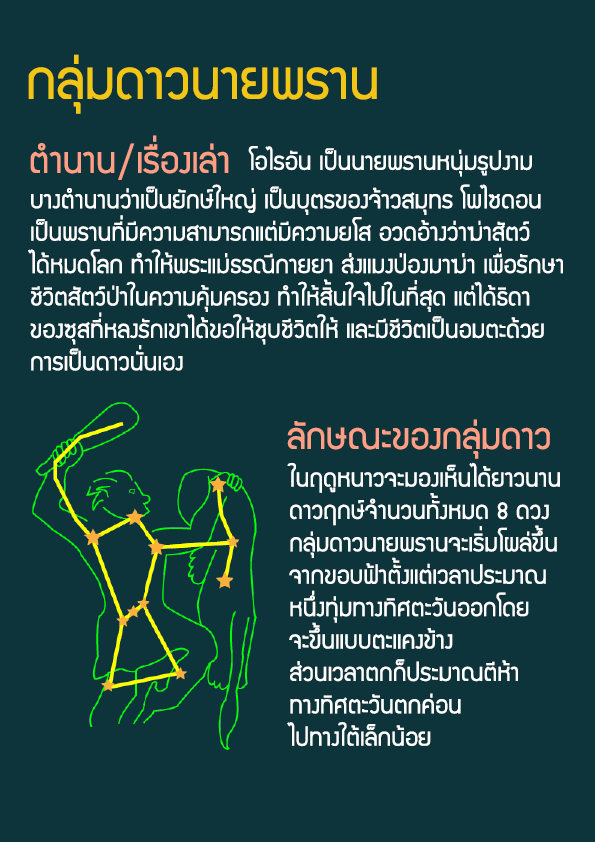
<style>
.page{position:relative;width:595px;height:842px;background:#0e343b}
.page>*{position:absolute;margin:0}
.t1{font:60px "supermarket";color:#f2c614}
.t2{font:40px "supermarket";color:#ff9f86}
.t3{font:27px "supermarket";color:#ffffff}
</style>
<div class="page">
<p class="t1" style="left:28px;top:54px;width:349px;height:60px">กลุ่มดาวนายพราน</p>
<p class="t2" style="left:30px;top:135px;width:199px;height:45px">ตำนาน/เรื่องเล่า</p>
<p class="t3" style="left:248px;top:146px;width:284px;height:31px">โอไรอัน เป็นนายพรานหนุ่มรูปงาม</p>
<p class="t3" style="left:28px;top:184px;width:535px;height:187px">บางตำนานว่าเป็นยักษ์ใหญ่ เป็นบุตรของจ้าวสมุทร โพไซดอน <br>เป็นพรานที่มีความสามารถแต่มีความยโส อวดอ้างว่าฆ่าสัตว์<br>ได้หมดโลก ทำให้พระแม่ธรณีกายยา ส่งแมงป่องมาฆ่า เพื่อรักษา<br>ชีวิตสัตว์ป่าในความคุ้มครอง ทำให้สิ้นใจไปในที่สุด แต่ได้ธิดา<br>ของซุสที่หลงรักเขาได้ขอให้ชุบชีวิตให้ และมีชีวิตเป็นอมตะด้วย<br>การเป็นดาวนั่นเอง</p>
<p class="t2" style="left:287px;top:419px;width:263px;height:40px">ลักษณะของกลุ่มดาว</p>
<p class="t3" style="left:287px;top:462px;width:273px;height:285px">ในฤดูหนาวจะมองเห็นได้ยาวนาน<br>ดาวฤกษ์จำนวนทั้งหมด 8 ดวง <br>กลุ่มดาวนายพรานจะเริ่มโผล่ขึ้น<br>จากขอบฟ้าตั้งแต่เวลาประมาณ<br>หนึ่งทุ่มทางทิศตะวันออกโดย<br>จะขึ้นแบบตะแคงข้าง<br>ส่วนเวลาตกก็ประมาณตีห้า <br>ทางทิศตะวันตกค่อน<br>ไปทางใต้เล็กน้อย</p>
</div>
